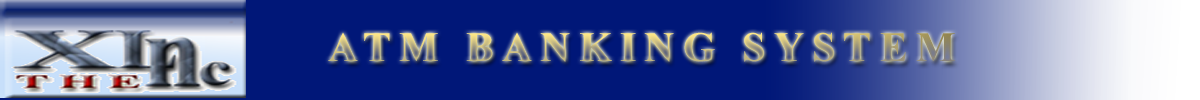
<style>
.page{position:relative;width:1200px;height:100px;background:#001778}
.page>*{position:absolute;margin:0}
.t1{font:41.7px "TimesNewRomanPS-BoldMT";letter-spacing:0.2em}
</style>
<div class="page">
<p class="t1" style="left:328px;top:32px;width:627px;height:30px">ATM BANKING SYSTEM</p>
</div>
